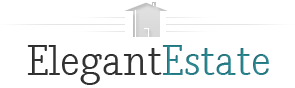
<style>
.page{position:relative;width:295px;height:88px;background:#ffffff}
.page>*{position:absolute;margin:0}
.t1{font:40.7px "NadiaSerifNormal";color:#373737}
.t2{font:40.7px "NadiaSerifNormal";letter-spacing:0.018em;color:#2d8d98}
</style>
<div class="page">
<p class="t1" style="left:27px;top:45px;width:242px;height:40px">Elegant<span class="t2">Estate</span></p>
</div>
